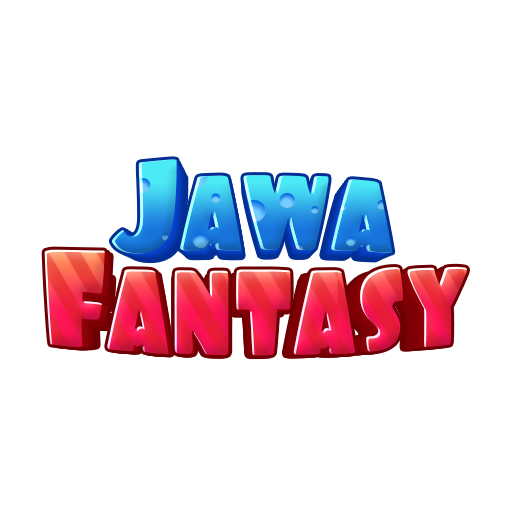
<style>
.page{position:relative;width:512px;height:512px;background:#ffffff}
.page>*{position:absolute;margin:0}
.t1{font:125px "Foo-Regular";letter-spacing:-0.01em}
.t2{font:122.5px "Foo-Regular";letter-spacing:-0.01em}
.t3{font:120.1px "Foo-Regular";letter-spacing:-0.01em}
.t4{font:117.6px "Foo-Regular";letter-spacing:-0.01em}
.t5{font:115.3px "Foo-Regular";letter-spacing:-0.01em}
.t6{font:113px "Foo-Regular";letter-spacing:-0.01em}
.t7{font:110.7px "Foo-Regular";letter-spacing:-0.01em}
.t8{font:137.5px "Foo-Regular";letter-spacing:-0.005em;scale:0.91 1}
.t9{font:134.8px "Foo-Regular";letter-spacing:-0.005em;scale:0.91 1}
.t10{font:132.1px "Foo-Regular";letter-spacing:-0.005em;scale:0.91 1}
</style>
<div class="page">
<p class="t1" style="left:111px;top:159px;width:282px;height:95px">Jawa</p>
<p class="t2" style="left:114px;top:162px;width:276px;height:93px">Jawa</p>
<p class="t3" style="left:117px;top:165px;width:270px;height:91px">Jawa</p>
<p class="t4" style="left:120px;top:168px;width:265px;height:89px">Jawa</p>
<p class="t5" style="left:122px;top:171px;width:260px;height:87px">Jawa</p>
<p class="t6" style="left:125px;top:173px;width:254px;height:86px">Jawa</p>
<p class="t7" style="left:128px;top:176px;width:249px;height:85px">Jawa</p>
<p class="t8" style="left:44px;top:249px;width:423px;height:107px">Fantasy</p>
<p class="t9" style="left:48px;top:251px;width:415px;height:105px">Fantasy</p>
<p class="t10" style="left:52px;top:254px;width:407px;height:102px">Fantasy</p>
</div>
